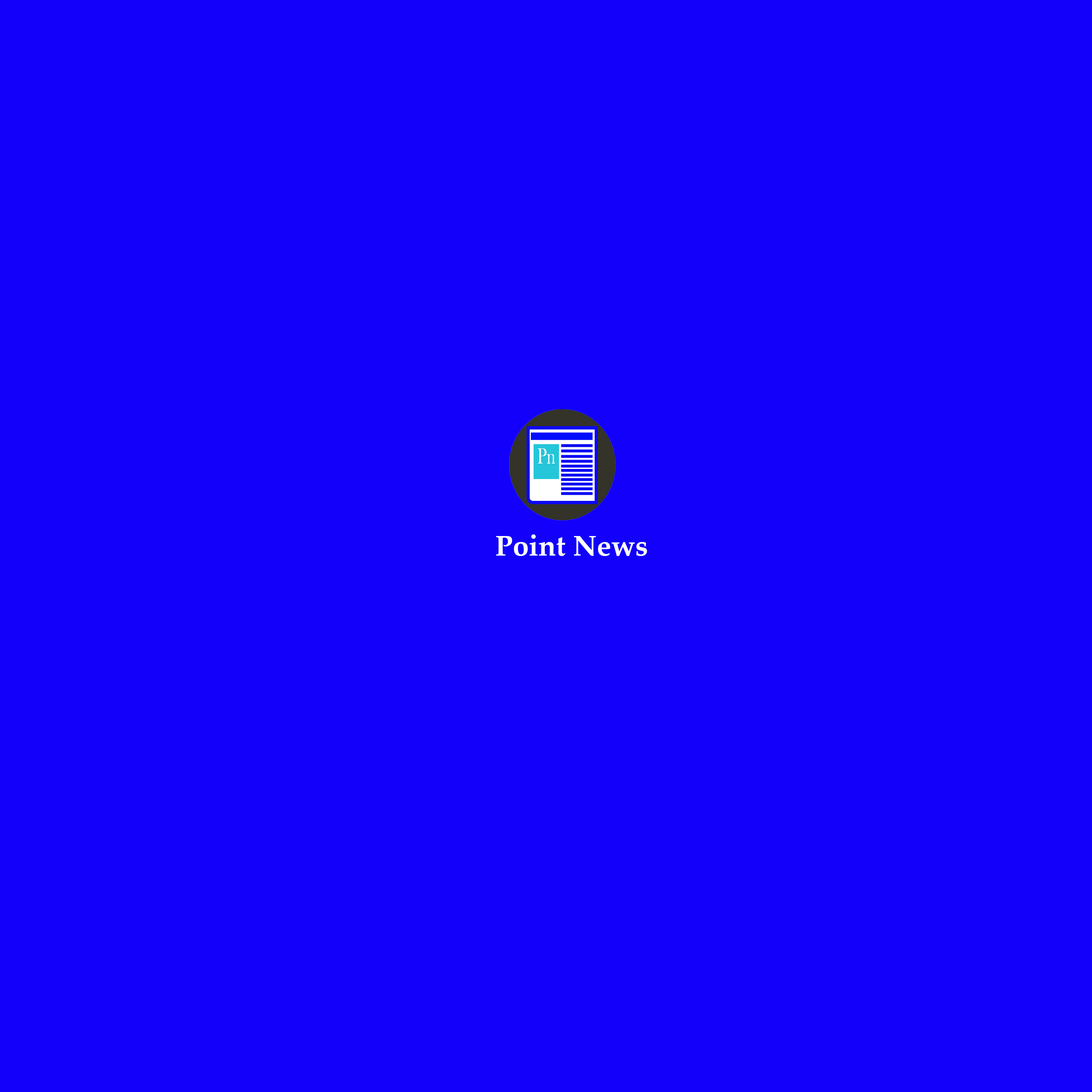
<style>
.page{position:relative;width:1092px;height:1092px;background:#1200fa}
.page>*{position:absolute;margin:0}
.t1{font:28.8px "PalatinoLinotype-Bold";color:#ffffff}
</style>
<div class="page">
<p class="t1" style="left:496px;top:534px;width:151px;height:22px">Point News</p>
</div>
